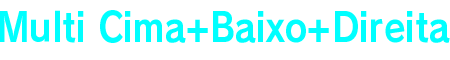
<style>
.page{position:relative;width:450px;height:60px;background:#ffffff}
.page>*{position:absolute;margin:0}
.t1{font:40px "RodinPro-B";color:#00ffff;scale:0.87 1}
</style>
<div class="page">
<p class="t1" style="left:0px;top:10px;width:450px;height:33px">Multi Cima+Baixo+Direita</p>
</div>
